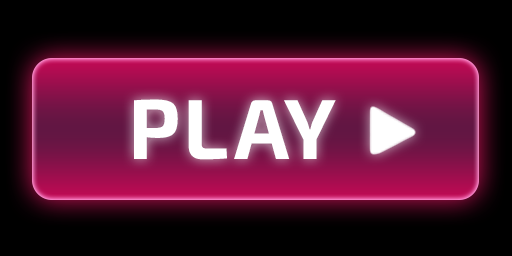
<style>
.page{position:relative;width:512px;height:256px;background:#000000}
.page>*{position:absolute;margin:0}
.t1{font:85px "Exo2-Bold";color:#ffffff}
</style>
<div class="page">
<p class="t1" style="left:134px;top:99px;width:202px;height:61px">PLAY</p>
</div>
